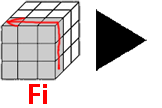
<style>
.page{position:relative;width:162px;height:108px;background:#ffffff}
.page>*{position:absolute;margin:0}
.t1{font:27px "MyriadPro-Regular";color:#ff0000;font-weight:bold}
</style>
<div class="page">
<p class="t1" style="left:29px;top:84px;width:18px;height:20px">Fi</p>
</div>
